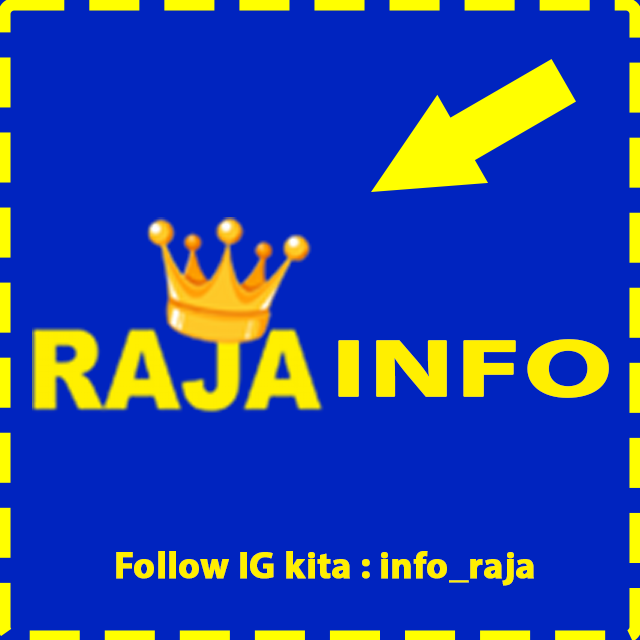
<style>
.page{position:relative;width:640px;height:640px;background:#0024bf}
.page>*{position:absolute;margin:0}
.t1{font:81.9px "MyriadPro-Bold";letter-spacing:-0.005em;color:#fff000;font-weight:bold;scale:1.5 1}
.t2{font:37.5px "MyriadPro-Bold";letter-spacing:-0.005em;color:#fff000;font-weight:bold}
</style>
<div class="page">
<p class="t1" style="left:338px;top:339px;width:271px;height:59px">INFO</p>
<p class="t2" style="left:116px;top:551px;width:418px;height:35px">Follow IG kita : info_raja</p>
</div>
